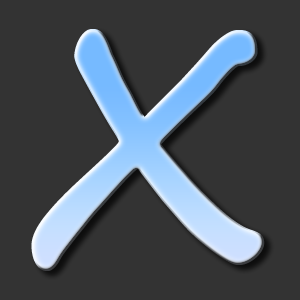
<style>
.page{position:relative;width:300px;height:300px;background:#333333}
.page>*{position:absolute;margin:0}
.t1{font:320px "SegoeScript-Bold"}
</style>
<div class="page">
<p class="t1" style="left:31px;top:29px;width:234px;height:242px">X</p>
</div>
